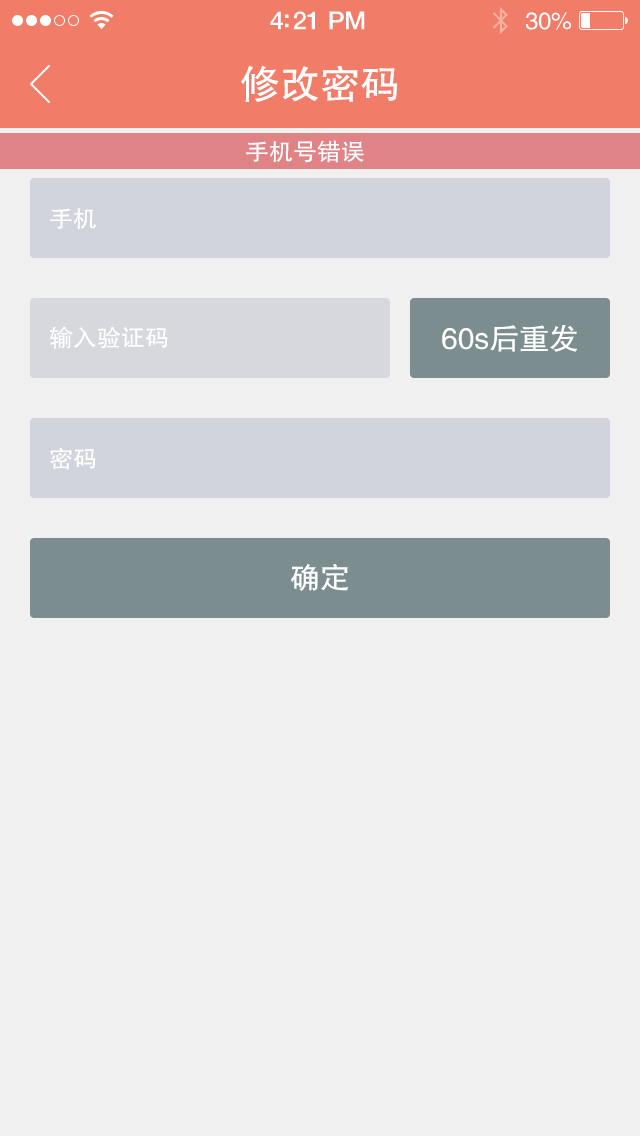
<style>
.page{position:relative;width:640px;height:1136px;background:#f0f0f0}
.page>*{position:absolute;margin:0}
.t1{font:25px "HelveticaNeue-Medium";letter-spacing:-0.02em;color:#ffffff}
.t2{font:24px "FZHTJW--GB1-0";letter-spacing:-0.02em;color:#ffffff}
.t3{font:40px "FZHTJW--GB1-0";color:#ffffff}
.t4{font:24px "FZHTJW--GB1-0";color:#ffffff}
.t5{font:30px "FZHTJW--GB1-0";color:#ffffff}
</style>
<div class="page">
<p class="t1" style="left:270px;top:11px;width:95px;height:19px">4:21 PM</p>
<p class="t2" style="left:525px;top:12px;width:46px;height:18px">30%</p>
<p class="t3" style="left:241px;top:65px;width:157px;height:37px">修改密码</p>
<p class="t4" style="left:246px;top:140px;width:118px;height:23px">手机号错误</p>
<p class="t4" style="left:50px;top:208px;width:47px;height:21px">手机</p>
<p class="t4" style="left:50px;top:326px;width:118px;height:23px">输入验证码</p>
<p class="t5" style="left:442px;top:325px;width:136px;height:27px">60s后重发</p>
<p class="t4" style="left:50px;top:447px;width:46px;height:23px">密码</p>
<p class="t5" style="left:290px;top:563px;width:59px;height:28px">确定</p>
</div>
